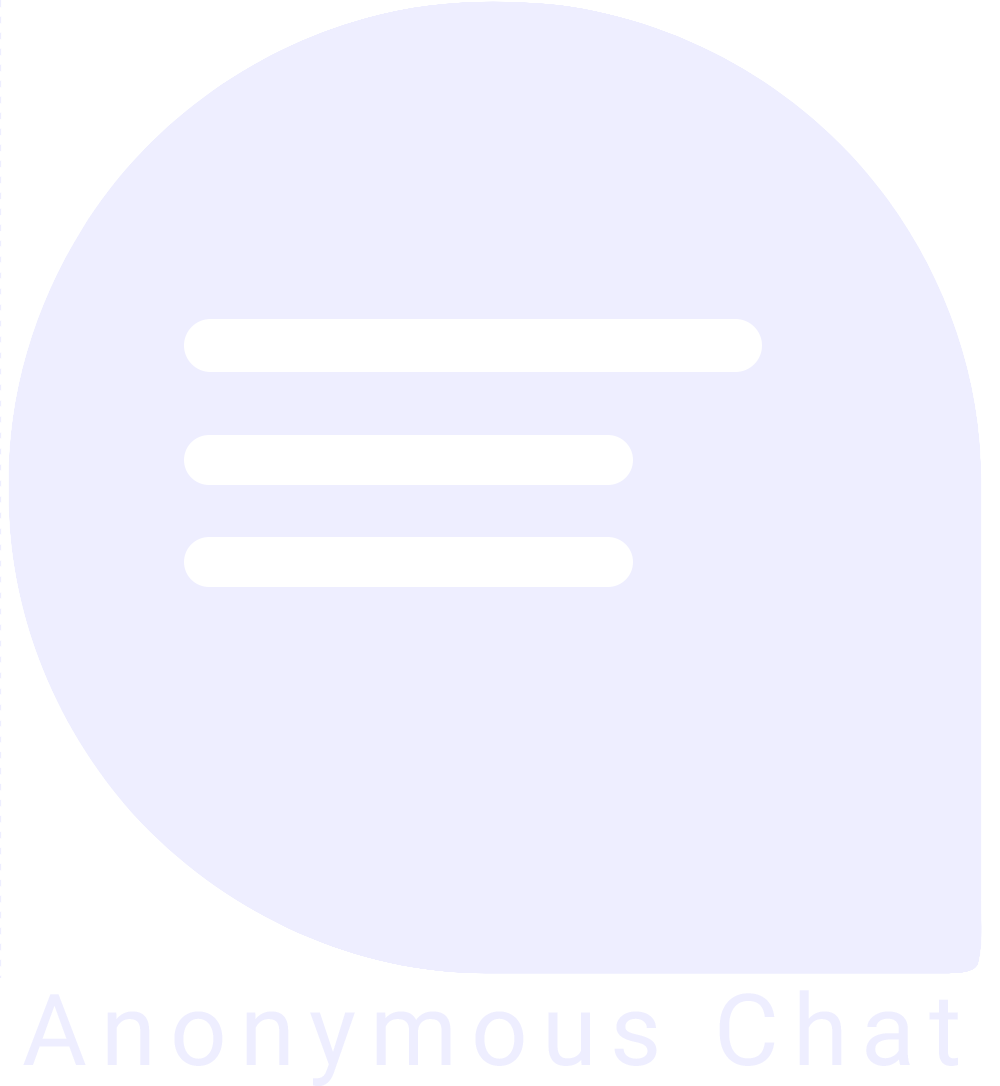
<style>
.page{position:relative;width:1000px;height:1086px;background:#eeeeff}
.page>*{position:absolute;margin:0}
.t1{font:99.4px "Roboto-Regular";letter-spacing:0.14em;color:#eeeeff}
</style>
<div class="page">
<p class="t1" style="left:23px;top:990px;width:935px;height:97px">Anonymous Chat</p>
</div>
